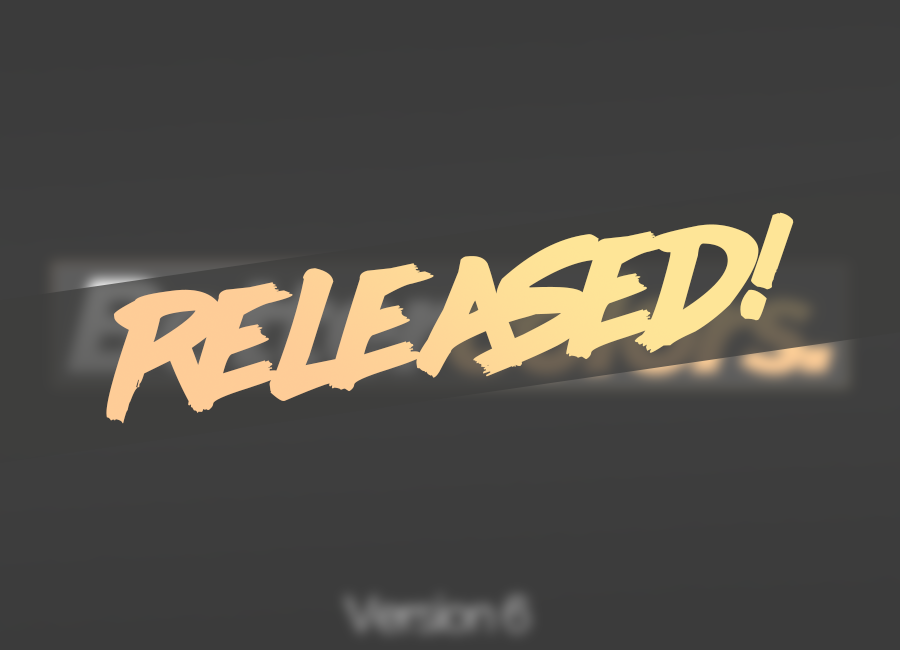
<style>
.page{position:relative;width:900px;height:650px}
.page>*{position:absolute;margin:0}
.t1{font:143.5px "lazer84";letter-spacing:-0.06em;color:#fee597}
</style>
<div class="page">
<p class="t1" style="left:106px;top:212px;width:688px;height:212px;rotate:-8deg">Released!</p>
</div>
